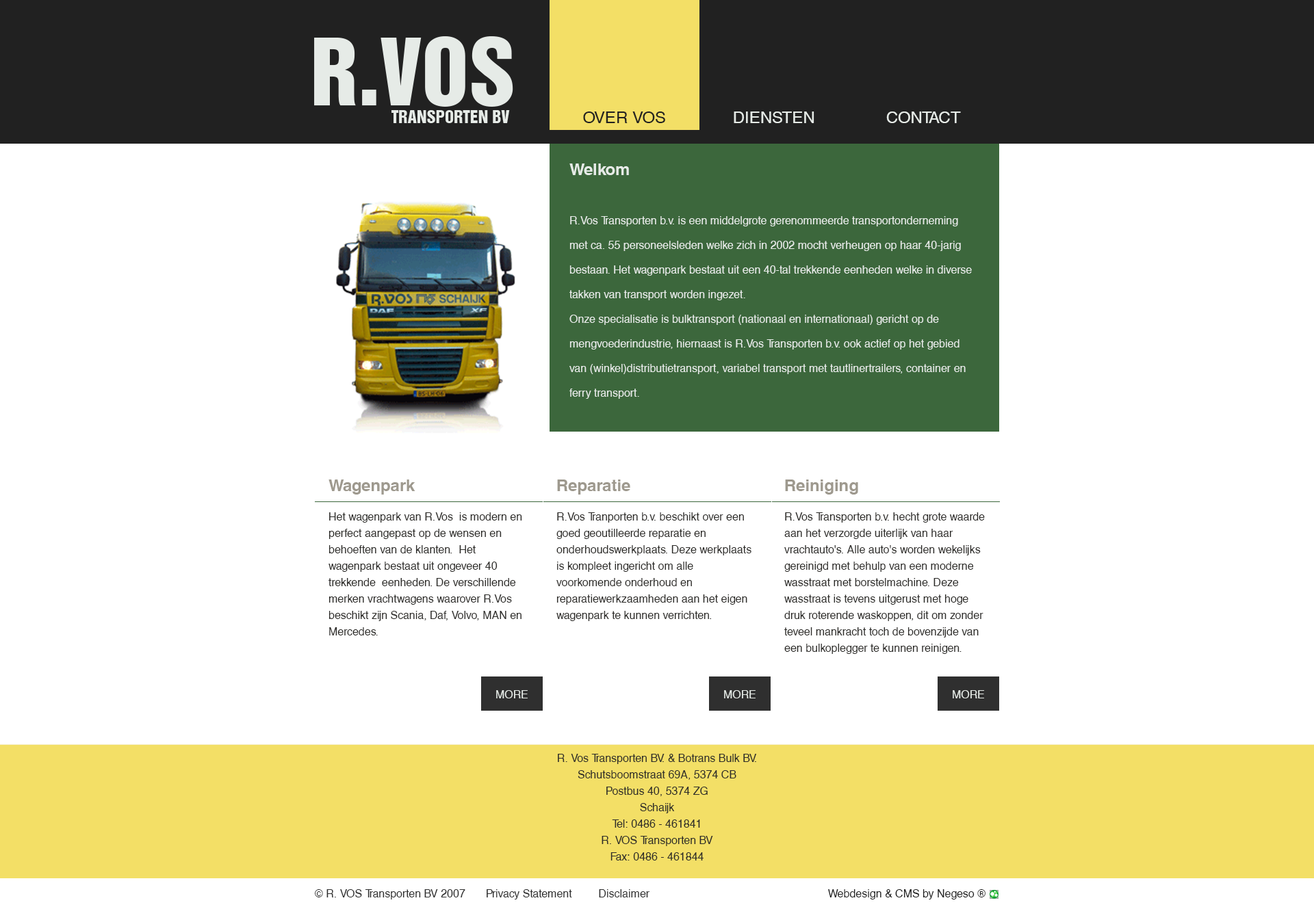
<style>
.page{position:relative;width:1314px;height:907px;background:#ffffff}
.page>*{position:absolute;margin:0}
.t1{font:16.4px "HelveticaCE-Regular";color:#212121}
.t2{font:16.4px "HelveticaCE-Regular";color:#e6ebe7}
.t3{font:11px/24.6px "HelveticaCE-Regular";color:#e6ebe7}
.t4{font:16.4px/24.6px "HelveticaCE-Bold";color:#e6ebe7}
.t5{font:11px/16.4px "HelveticaCE-Regular";color:#2d2c29}
.t6{font:16.4px "HelveticaCE-Bold";color:#9e998e}
.t7{font:11px "HelveticaCE-Regular";color:#e6ebe7}
.t8{font:11px "HelveticaCE-Regular";color:#2f2f2f}
.t9{font:11px "HelveticaCE-Regular";color:#212121}
</style>
<div class="page">
<p class="t1" style="left:583px;top:112px;width:82px;height:11px">OVER VOS</p>
<p class="t2" style="left:734px;top:112px;width:80px;height:11px">DIENSTEN</p>
<p class="t2" style="left:886px;top:112px;width:75px;height:11px">CONTACT</p>
<p class="t3" style="left:569px;top:164px;width:403px;height:235px"><span class="t4">Welkom<br></span><br>R.Vos Transporten b.v. is een middelgrote gerenommeerde transportonderneming met ca. 55 personeelsleden welke zich in 2002 mocht verheugen op haar 40-jarig bestaan. Het wagenpark bestaat uit een 40-tal trekkende eenheden welke in diverse takken van transport worden ingezet. <br>Onze specialisatie is bulktransport (nationaal en internationaal) gericht op de mengvoederindustrie, hiernaast is R.Vos Transporten b.v. ook actief op het gebied van (winkel)distributietransport, variabel transport met tautlinertrailers, container en ferry transport.</p>
<p class="t5" style="left:329px;top:480px;width:193px;height:156px"><span class="t6">Wagenpark<br><br></span>Het wagenpark van R.Vos  is modern en perfect aangepast op de wensen en behoeften van de klanten.  Het wagenpark bestaat uit ongeveer 40 trekkende  eenheden. De verschillende merken vrachtwagens waarover R.Vos beschikt zijn Scania, Daf, Volvo, MAN en Mercedes.</p>
<p class="t5" style="left:556px;top:480px;width:195px;height:141px"><span class="t6">Reparatie<br><br></span>R.Vos Tranporten b.v. beschikt over een goed geoutilleerde reparatie en onderhoudswerkplaats. Deze werkplaats is kompleet ingericht om alle voorkomende onderhoud en reparatiewerkzaamheden aan het eigen wagenpark te kunnen verrichten.</p>
<p class="t5" style="left:784px;top:480px;width:201px;height:174px"><span class="t6">Reiniging<br><br></span>R.Vos Transporten b.v. hecht grote waarde aan het verzorgde uiterlijk van haar vrachtauto's. Alle auto's worden wekelijks gereinigd met behulp van een moderne wasstraat met borstelmachine. Deze wasstraat is tevens uitgerust met hoge druk roterende waskoppen, dit om zonder teveel mankracht toch de bovenzijde van een bulkoplegger te kunnen reinigen.</p>
<p class="t7" style="left:496px;top:691px;width:32px;height:8px">MORE</p>
<p class="t7" style="left:724px;top:691px;width:32px;height:8px">MORE</p>
<p class="t7" style="left:953px;top:691px;width:31px;height:8px">MORE</p>
<p class="t5" style="left:558px;top:754px;width:199px;height:107px;text-align:center">R. Vos Transporten BV. &amp; Botrans Bulk BV.<br>Schutsboomstraat 69A, 5374 CB<br>Postbus 40, 5374 ZG<br>Schaijk<br>Tel: 0486 - 461841<br>R. VOS Transporten BV<br>Fax: 0486 - 461844</p>
<p class="t8" style="left:315px;top:890px;width:150px;height:10px">© R. VOS Transporten BV 2007</p>
<p class="t8" style="left:487px;top:890px;width:85px;height:10px">Privacy Statement</p>
<p class="t8" style="left:599px;top:890px;width:50px;height:8px">Disclaimer</p>
<p class="t9" style="left:828px;top:890px;width:158px;height:10px">Webdesign &amp; CMS by Negeso ®</p>
</div>
